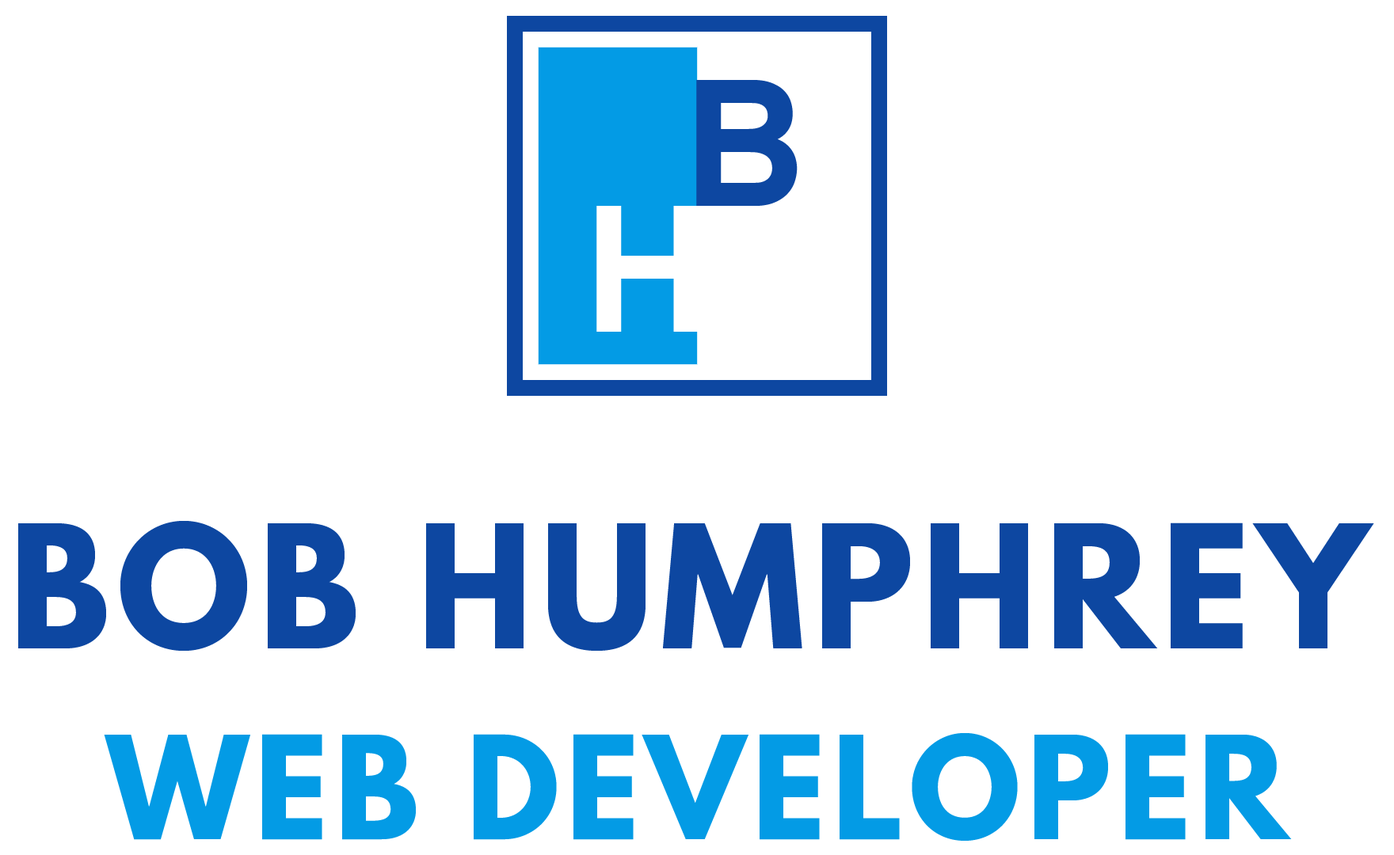
<style>
.page{position:relative;width:1394px;height:855px;background:#ffffff}
.page>*{position:absolute;margin:0}
.t1{font:179.8px "Overpass-Bold";color:#0d47a1}
.t2{font:179.8px "Overpass-Bold";color:#ffffff}
.t3{font:152.1px "LeagueSpartan-Bold";letter-spacing:0.05em;color:#0d47a1}
.t4{font:126.7px "LeagueSpartan-Bold";letter-spacing:0.05em;color:#039be5}
</style>
<div class="page">
<p class="t1" style="left:696px;top:80px;width:102px;height:126px">B</p>
<p class="t2" style="left:596px;top:206px;width:103px;height:126px">H</p>
<p class="t3" style="left:18px;top:521px;width:1356px;height:130px">BOB HUMPHREY</p>
<p class="t4" style="left:104px;top:733px;width:1188px;height:108px">WEB DEVELOPER</p>
</div>
